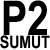
<style>
.page{position:relative;width:50px;height:50px;background:#ffffff}
.page>*{position:absolute;margin:0}
.t1{font:17.2px/13.1px "ArialNarrow-Bold";color:#000000}
.t2{font:48px/13.1px "ArialNarrow-Bold";color:#000000}
</style>
<div class="page">
<p class="t1" style="left:0px;top:0px;width:50px;height:49px;text-align:center"><span class="t2">P2<br></span>SUMUT</p>
</div>
